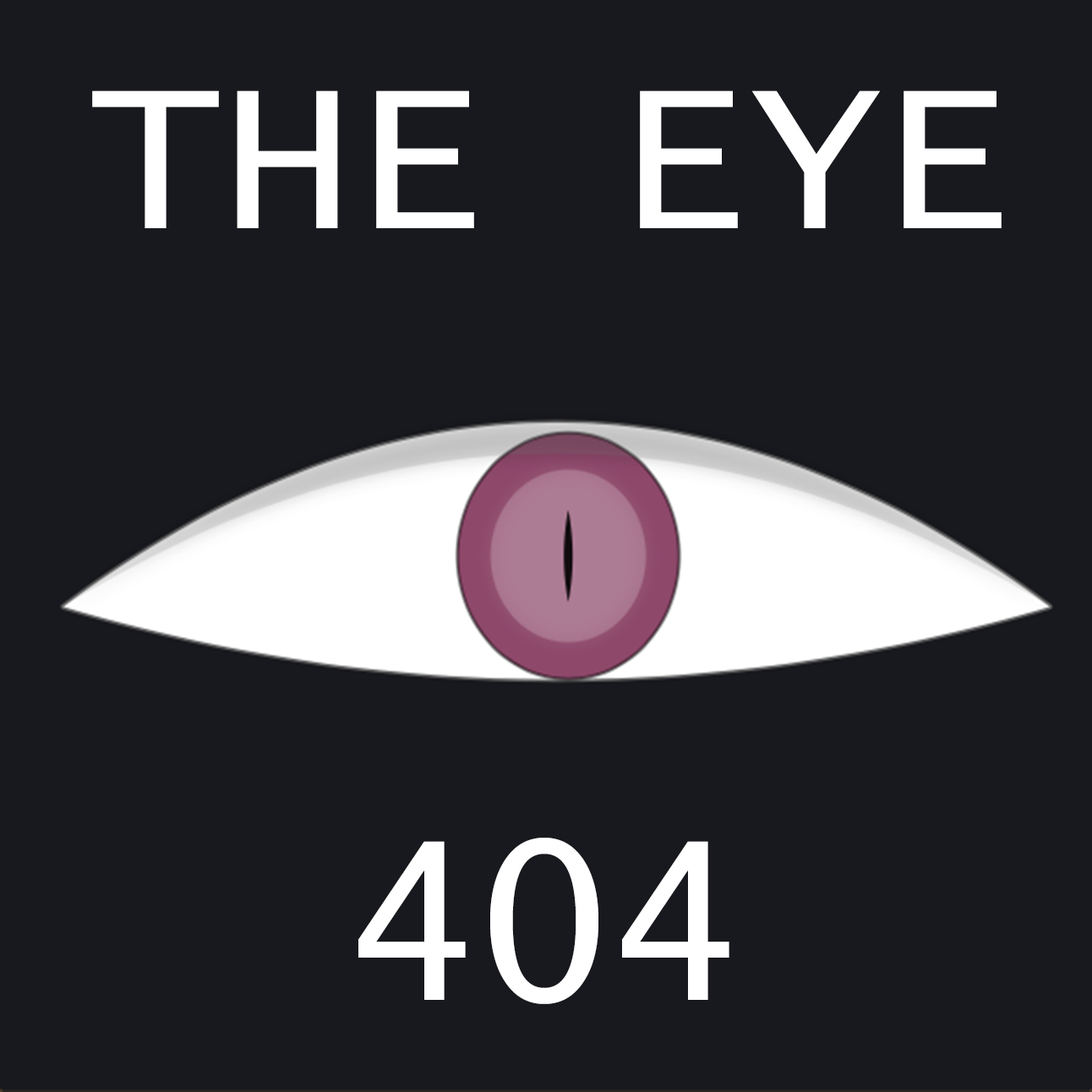
<style>
.page{position:relative;width:1092px;height:1092px;background:#18191e}
.page>*{position:absolute;margin:0}
.t1{font:218.9px "LucidaConsole";color:#ffffff;text-transform:uppercase}
</style>
<div class="page">
<p class="t1" style="left:92px;top:90px;width:910px;height:138px">the eye</p>
<p class="t1" style="left:358px;top:838px;width:371px;height:166px">404</p>
</div>
